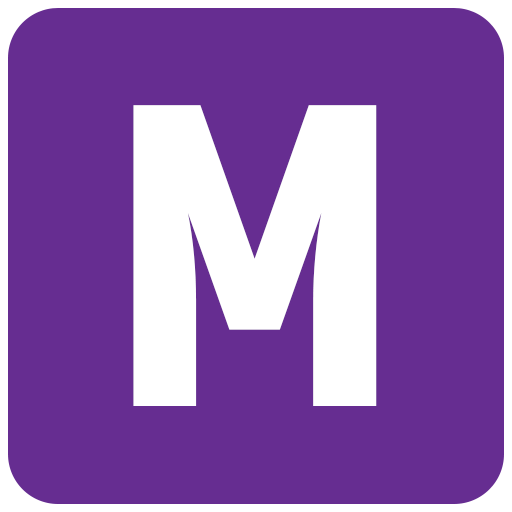
<style>
.page{position:relative;width:512px;height:512px;background:#662d91}
.page>*{position:absolute;margin:0}
.t1{font:434.3px "Khand-Bold";letter-spacing:-0.025em;color:#ffffff}
</style>
<div class="page">
<p class="t1" style="left:133px;top:105px;width:244px;height:301px">M</p>
</div>
